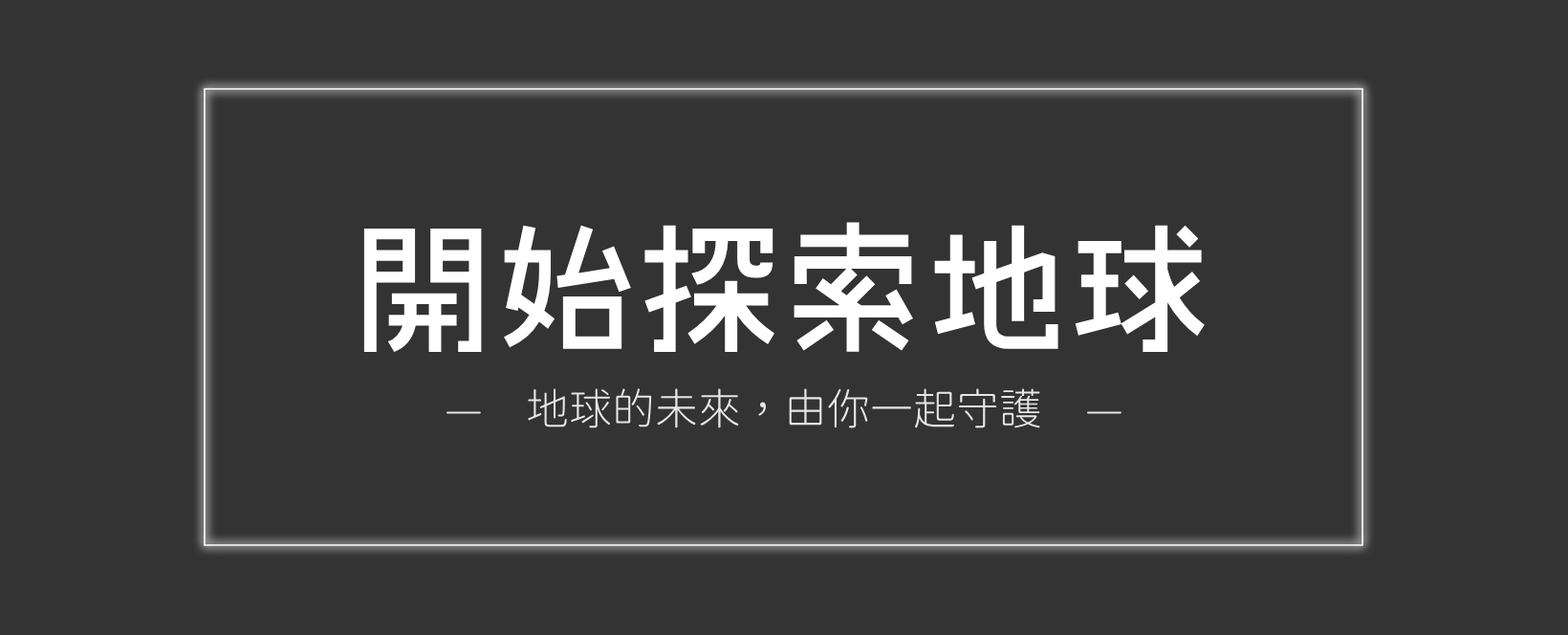
<style>
.page{position:relative;width:1568px;height:635px;background:#333333}
.page>*{position:absolute;margin:0}
.t1{font:143.4px "Konatu-Tohaba";color:#ffffff}
.t2{font:43px "GenSenRounded2TW-L";color:#e6e6e6}
</style>
<div class="page">
<p class="t1" style="left:363px;top:222px;width:842px;height:130px">開始探索地球</p>
<p class="t2" style="left:446px;top:388px;width:676px;height:40px">—　地球的未來，由你一起守護　—</p>
</div>
